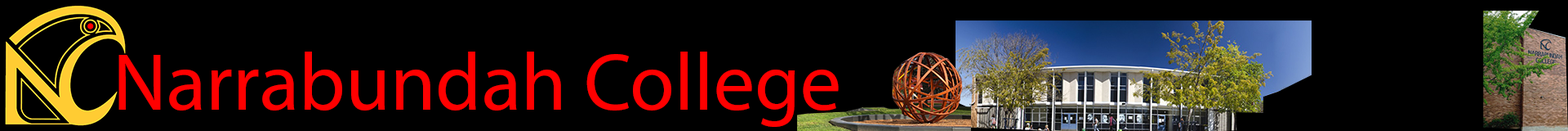
<style>
.page{position:relative;width:1568px;height:131px;background:#000000}
.page>*{position:absolute;margin:0}
.t1{font:81.7px "MyriadPro-Regular";color:#ff0000}
</style>
<div class="page">
<p class="t1" style="left:118px;top:51px;width:721px;height:76px">Narrabundah College</p>
</div>
